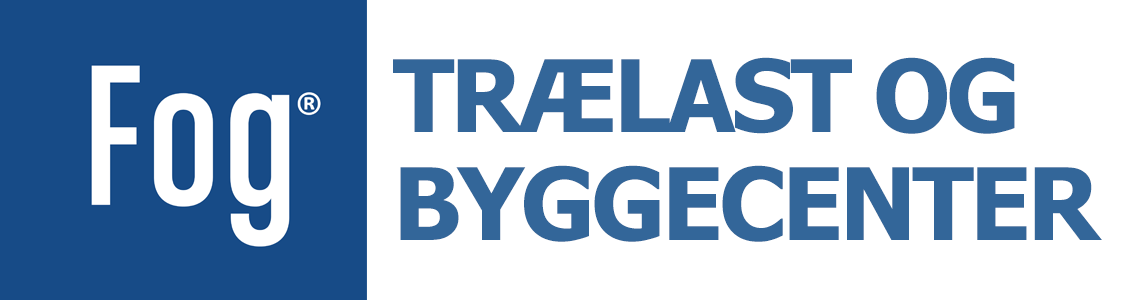
<style>
.page{position:relative;width:1140px;height:300px;background:#ffffff}
.page>*{position:absolute;margin:0}
.t1{font:100px/27px "Tahoma-Bold";letter-spacing:-0.04em;color:#336699}
</style>
<div class="page">
<p class="t1" style="left:393px;top:57px;width:709px;height:185px">TRÆLAST OG<br><br><br><br>BYGGECENTER</p>
</div>
